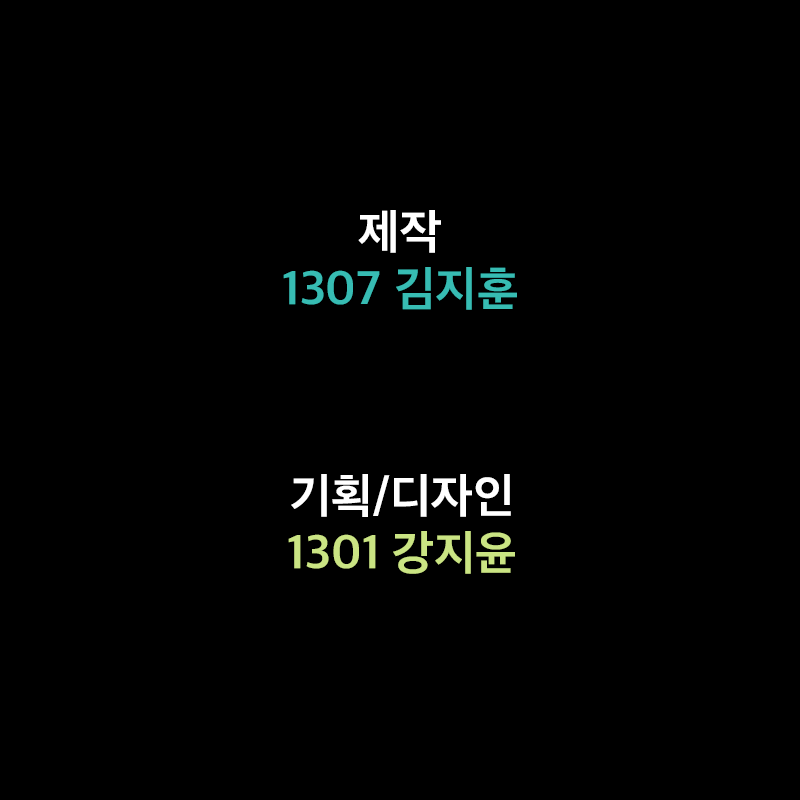
<style>
.page{position:relative;width:800px;height:800px;background:#000000}
.page>*{position:absolute;margin:0}
.t1{font:48px "AppleSDGothicNeoB00";color:#37bcb3}
.t2{font:48px "AppleSDGothicNeoB00";color:#ffffff}
.t3{font:48px "AppleSDGothicNeoB00";color:#cae483}
</style>
<div class="page">
<p class="t1" style="left:283px;top:210px;width:234px;height:100px;text-align:center"><span class="t2">제작<br></span>1307 김지훈</p>
<p class="t3" style="left:288px;top:474px;width:227px;height:100px;text-align:center"><span class="t2">기획/디자인<br></span>1301 강지윤</p>
</div>
